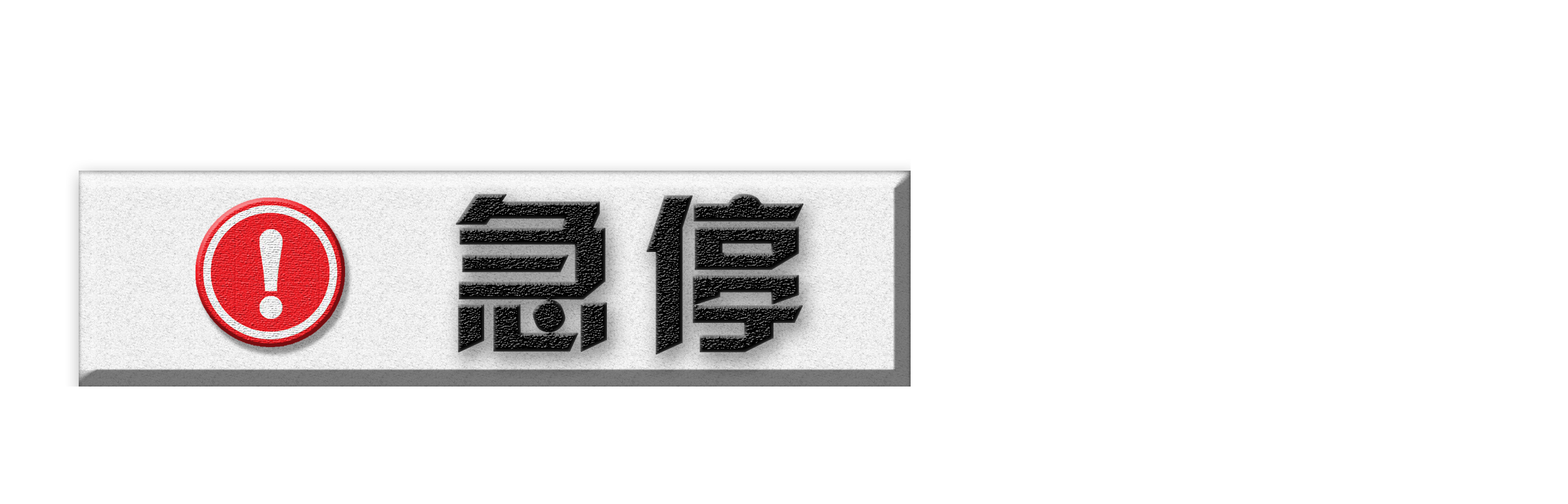
<style>
.page{position:relative;width:1568px;height:504px;background:#ffffff}
.page>*{position:absolute;margin:0}
.t1{font:171.6px "JLinXin";letter-spacing:0.1em;font-weight:bold}
</style>
<div class="page">
<p class="t1" style="left:455px;top:194px;width:349px;height:161px">急停</p>
</div>
